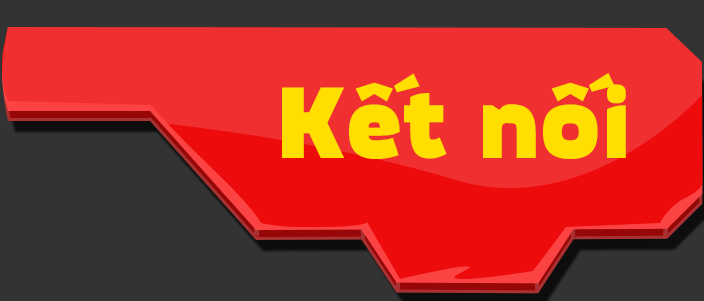
<style>
.page{position:relative;width:704px;height:301px;background:#333333}
.page>*{position:absolute;margin:0}
.t1{font:99.4px "MovaviGrotesqueBlack";color:#ffde00}
</style>
<div class="page">
<p class="t1" style="left:282px;top:73px;width:344px;height:86px">Kết nối</p>
</div>
